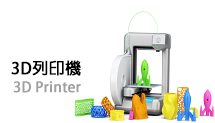
<style>
.page{position:relative;width:215px;height:123px;background:#ffffff}
.page>*{position:absolute;margin:0}
.t1{font:16px "AdobeFanHeitiStd-Bold";color:#000000;font-weight:bold}
.t2{font:14px "AdobeFanHeitiStd-Bold";color:#a0a0a0;font-weight:bold}
</style>
<div class="page">
<p class="t1" style="left:11px;top:60px;width:70px;height:16px">3D列印機</p>
<p class="t2" style="left:13px;top:81px;width:68px;height:12px">3D Printer</p>
</div>
